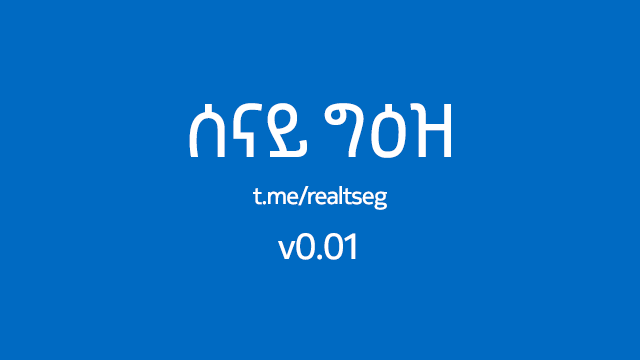
<style>
.page{position:relative;width:640px;height:360px;background:#006ac2}
.page>*{position:absolute;margin:0}
.t1{font:72px "NokiaPureHeadline-Regular";letter-spacing:-0.01em;color:#ffffff}
.t2{font:24px "NokiaPureHeadline-Regular";letter-spacing:-0.01em;color:#ffffff}
.t3{font:36px "NokiaPureHeadline-Regular";letter-spacing:-0.01em;color:#ffffff}
</style>
<div class="page">
<p class="t1" style="left:189px;top:103px;width:262px;height:55px">ሰናይ ግዕዝ</p>
<p class="t2" style="left:253px;top:186px;width:134px;height:24px">t.me/realtseg</p>
<p class="t3" style="left:278px;top:233px;width:78px;height:27px">v0.01</p>
</div>
